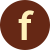
<style>
.page{position:relative;width:50px;height:50px;background:#662815}
.page>*{position:absolute;margin:0}
.t1{font:40px "TrebuchetMS-Bold";color:#fff1ba}
</style>
<div class="page">
<p class="t1" style="left:18px;top:10px;width:16px;height:30px">f</p>
</div>
